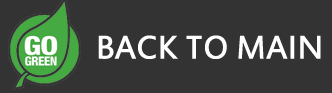
<style>
.page{position:relative;width:332px;height:93px;background:#333333}
.page>*{position:absolute;margin:0}
.t1{font:36.2px "EstrangeloEdessa";color:#ffffff}
</style>
<div class="page">
<p class="t1" style="left:98px;top:35px;width:223px;height:24px">BACK TO MAIN</p>
</div>
